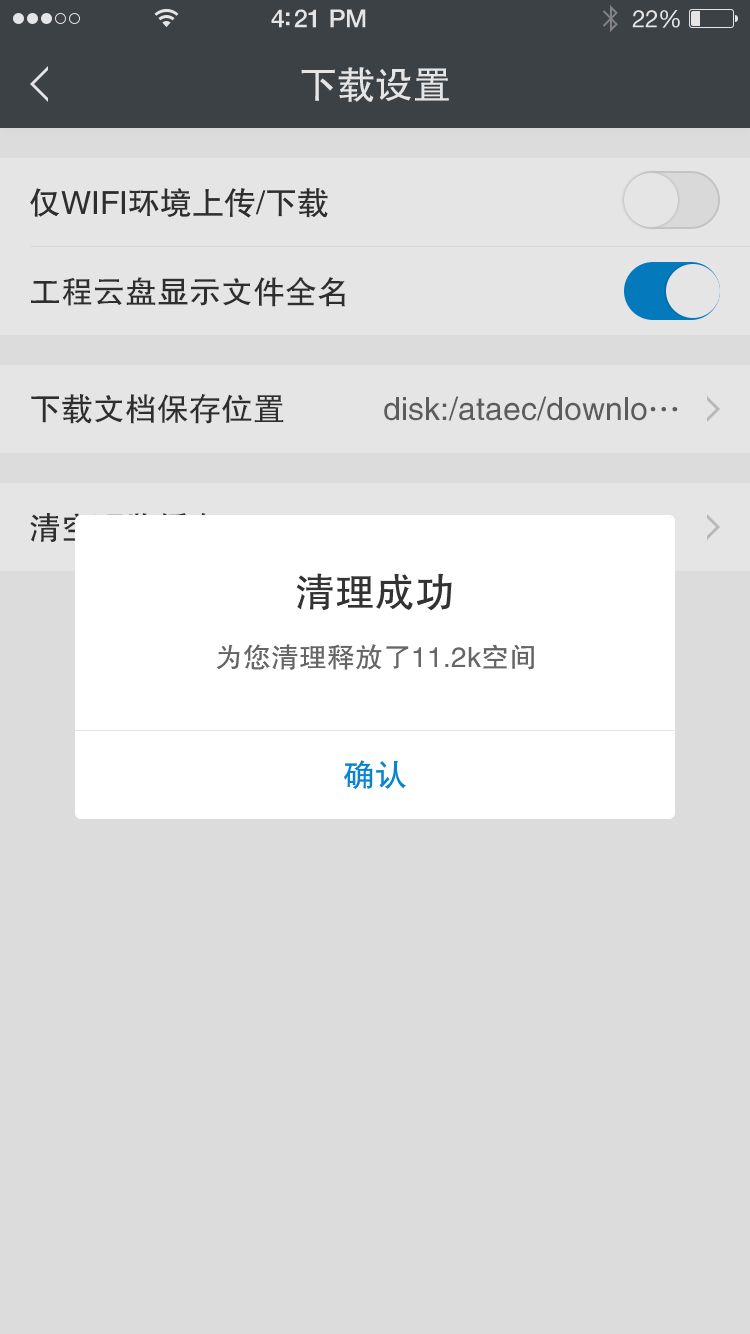
<style>
.page{position:relative;width:750px;height:1334px;background:#dcdcdc}
.page>*{position:absolute;margin:0}
.t1{font:38px "FZHTJW--GB1-0";color:#e5e5e5}
.t2{font:32px "FZHTJW--GB1-0";color:#333333}
.t3{font:32.1px "FZHTJW--GB1-0";color:#333333}
.t4{font:32.1px "FZHTJW--GB1-0";color:#666666}
.t5{font:40px "FZHTJW--GB1-0";color:#333333}
.t6{font:28px "FZHTJW--GB1-0";color:#666666}
.t7{font:32px "FZHTJW--GB1-0";color:#0487d0}
</style>
<div class="page">
<p class="t1" style="left:301px;top:67px;width:148px;height:35px">下载设置</p>
<p class="t2" style="left:30px;top:188px;width:298px;height:30px">仅WIFI环境上传/下载</p>
<p class="t3" style="left:31px;top:277px;width:314px;height:30px">工程云盘显示文件全名</p>
<p class="t3" style="left:31px;top:394px;width:253px;height:30px">下载文档保存位置</p>
<p class="t4" style="left:384px;top:396px;width:294px;height:25px">disk:/ataec/downlo…</p>
<p class="t5" style="left:296px;top:573px;width:156px;height:38px">清理成功</p>
<p class="t6" style="left:216px;top:644px;width:318px;height:26px">为您清理释放了11.2k空间</p>
<p class="t7" style="left:344px;top:760px;width:62px;height:29px">确认</p>
</div>
